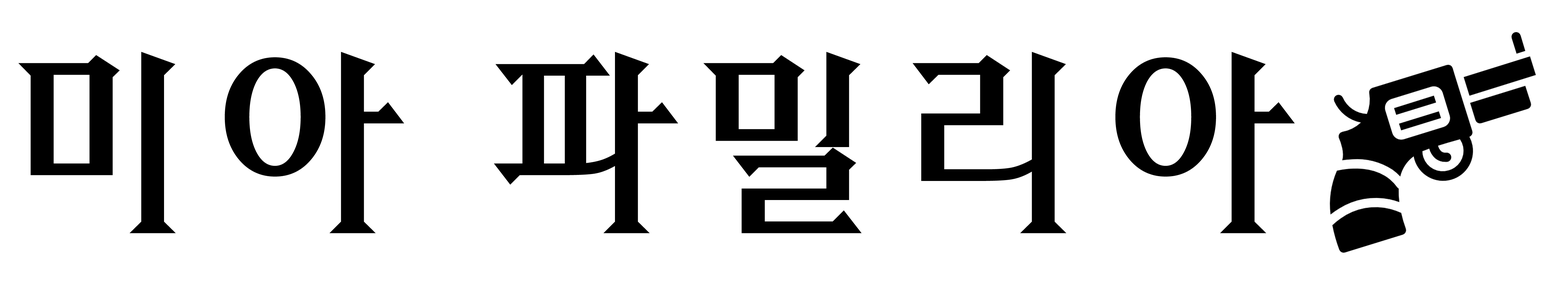
<style>
.page{position:relative;width:1568px;height:289px;background:#ffffff}
.page>*{position:absolute;margin:0}
.t1{font:205.5px "HYcysM";color:#000000}
</style>
<div class="page">
<p class="t1" style="left:18px;top:52px;width:1277px;height:181px">미아 파밀리아</p>
</div>
